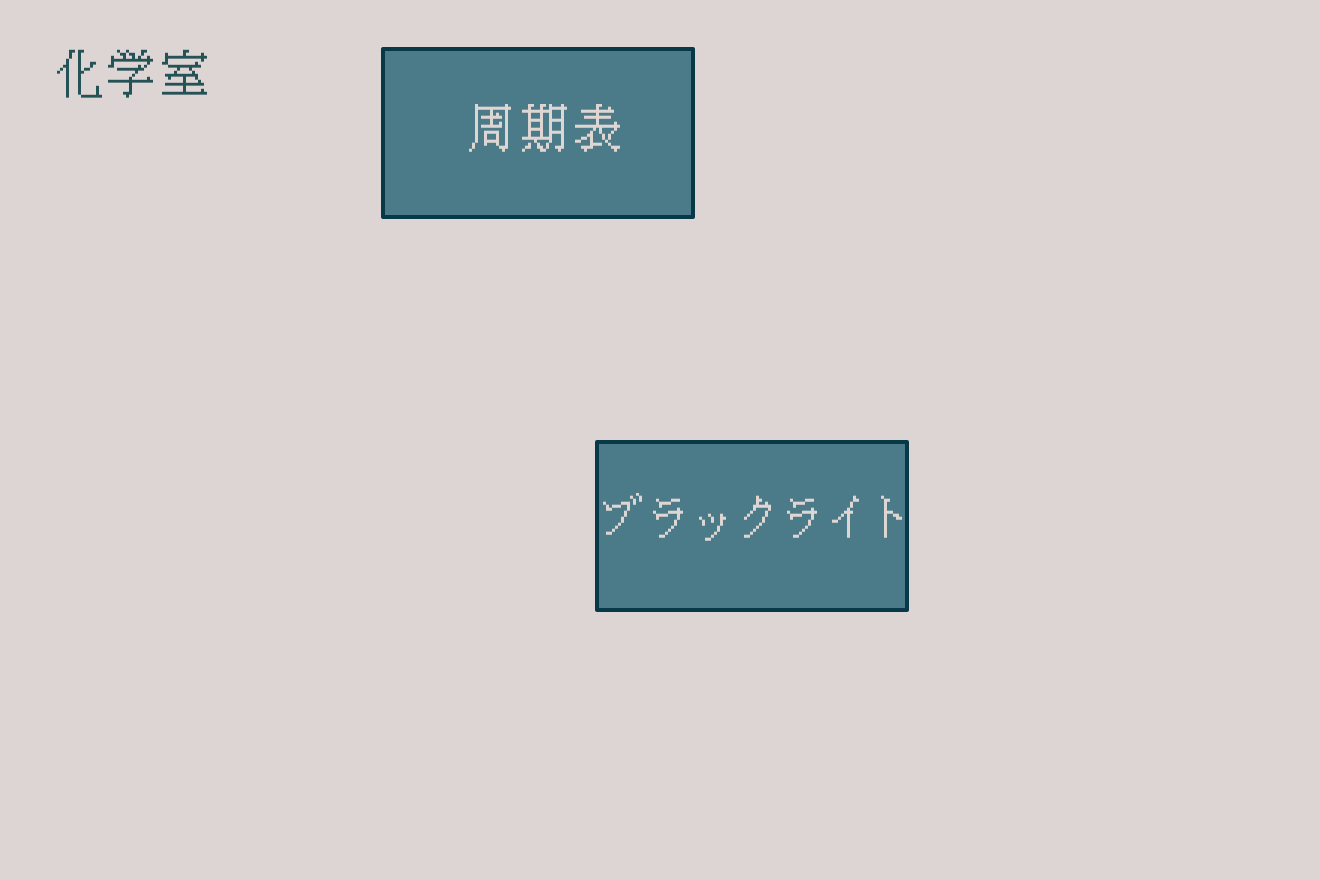
<style>
.page{position:relative;width:1320px;height:880px;background:#ddd5d3}
.page>*{position:absolute;margin:0}
.t1{font:48px "KH-Dot-kagurazaka-16";letter-spacing:0.14em;color:#1e4f5e}
.t2{font:48px "KH-Dot-kagurazaka-16";letter-spacing:0.14em;color:#e0d8d1}
</style>
<div class="page">
<p class="t1" style="left:57px;top:49px;width:150px;height:49px">化学室</p>
<p class="t2" style="left:469px;top:104px;width:151px;height:48px">周期表</p>
<p class="t2" style="left:603px;top:493px;width:299px;height:48px">ブラックライト</p>
</div>
